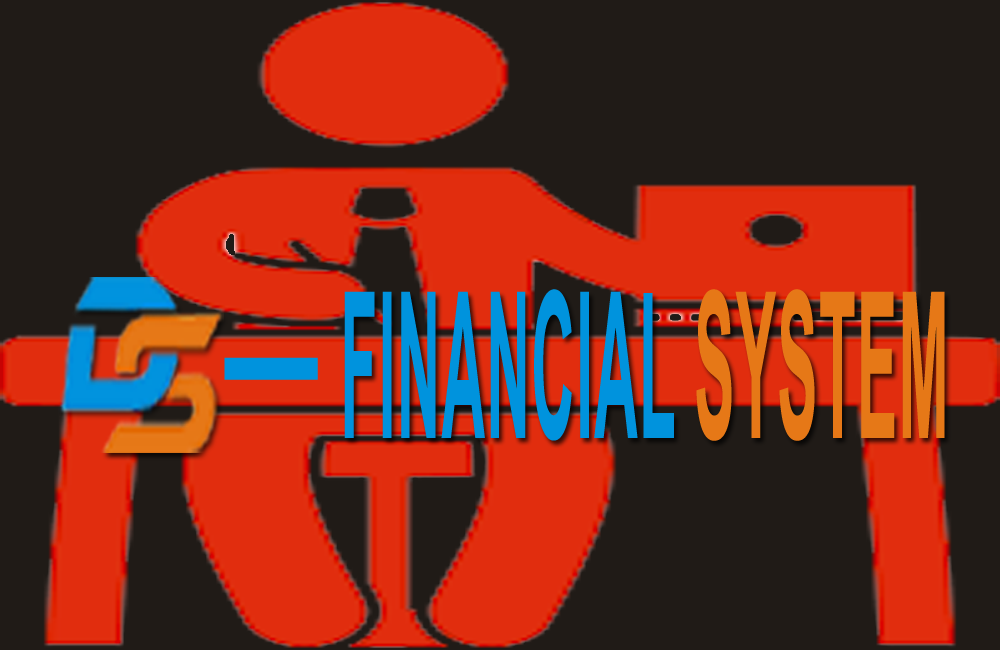
<style>
.page{position:relative;width:1000px;height:650px;background:#201b17}
.page>*{position:absolute;margin:0}
.t1{font:204px "Arial-BoldMT";letter-spacing:0.025em;color:#0093dd;scale:0.29 1}
.t2{font:204px "Arial-BoldMT";letter-spacing:0.025em;color:#e67817;scale:0.29 1}
.t3{font:157px "Arial-BoldMT";letter-spacing:0.025em;color:#0093dd;scale:2.2 1}
</style>
<div class="page">
<p class="t1" style="left:344px;top:289px;width:601px;height:152px">FINANCIAL <span class="t2">SYSTEM</span></p>
<p class="t3" style="left:224px;top:357px;width:94px;height:23px">-</p>
</div>
